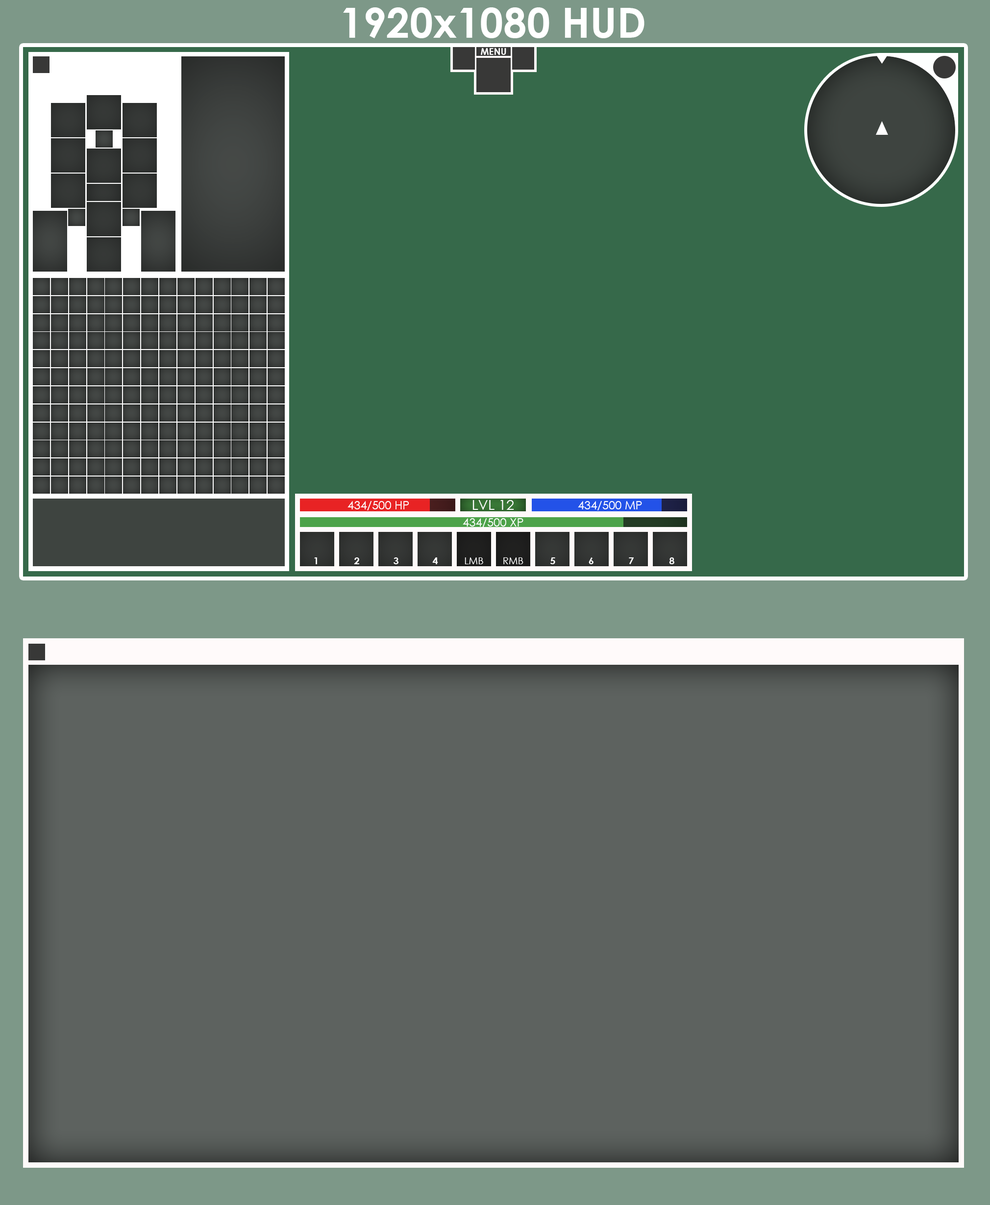
<style>
.page{position:relative;width:990px;height:1205px;background:#5d625f}
.page>*{position:absolute;margin:0}
.t1{font:41.7px "CenturyGothic-Bold";color:#ffffff}
.t2{font:9.3px "CenturyGothic-Bold";color:#ffffff}
.t3{font:12px "CenturyGothic";color:#ffffff;scale:0.97 1}
.t4{font:13.6px "CenturyGothic";color:#ffffff;scale:1.03 1}
.t5{font:11.7px "CenturyGothic";color:#ffffff}
.t6{font:10px "CenturyGothic-Bold";color:#ffffff}
.t7{font:10px "CenturyGothic";color:#ffffff}
</style>
<div class="page">
<p class="t1" style="left:343px;top:7px;width:301px;height:31px">1920x1080 HUD</p>
<p class="t2" style="left:481px;top:48px;width:25px;height:7px">MENU</p>
<p class="t3" style="left:347px;top:501px;width:62px;height:9px">434/500 HP</p>
<p class="t4" style="left:472px;top:500px;width:42px;height:10px">LVL 12</p>
<p class="t3" style="left:578px;top:501px;width:64px;height:9px">434/500 MP</p>
<p class="t5" style="left:463px;top:518px;width:60px;height:9px">434/500 XP</p>
<p class="t6" style="left:314px;top:557px;width:3px;height:7px">1</p>
<p class="t6" style="left:354px;top:557px;width:5px;height:7px">2</p>
<p class="t6" style="left:394px;top:557px;width:4px;height:7px">3</p>
<p class="t6" style="left:432px;top:557px;width:6px;height:7px">4</p>
<p class="t7" style="left:465px;top:557px;width:18px;height:7px">LMB</p>
<p class="t7" style="left:503px;top:557px;width:20px;height:7px">RMB</p>
<p class="t6" style="left:550px;top:557px;width:5px;height:7px">5</p>
<p class="t6" style="left:589px;top:557px;width:4px;height:7px">6</p>
<p class="t6" style="left:629px;top:557px;width:5px;height:7px">7</p>
<p class="t6" style="left:669px;top:557px;width:5px;height:7px">8</p>
</div>
